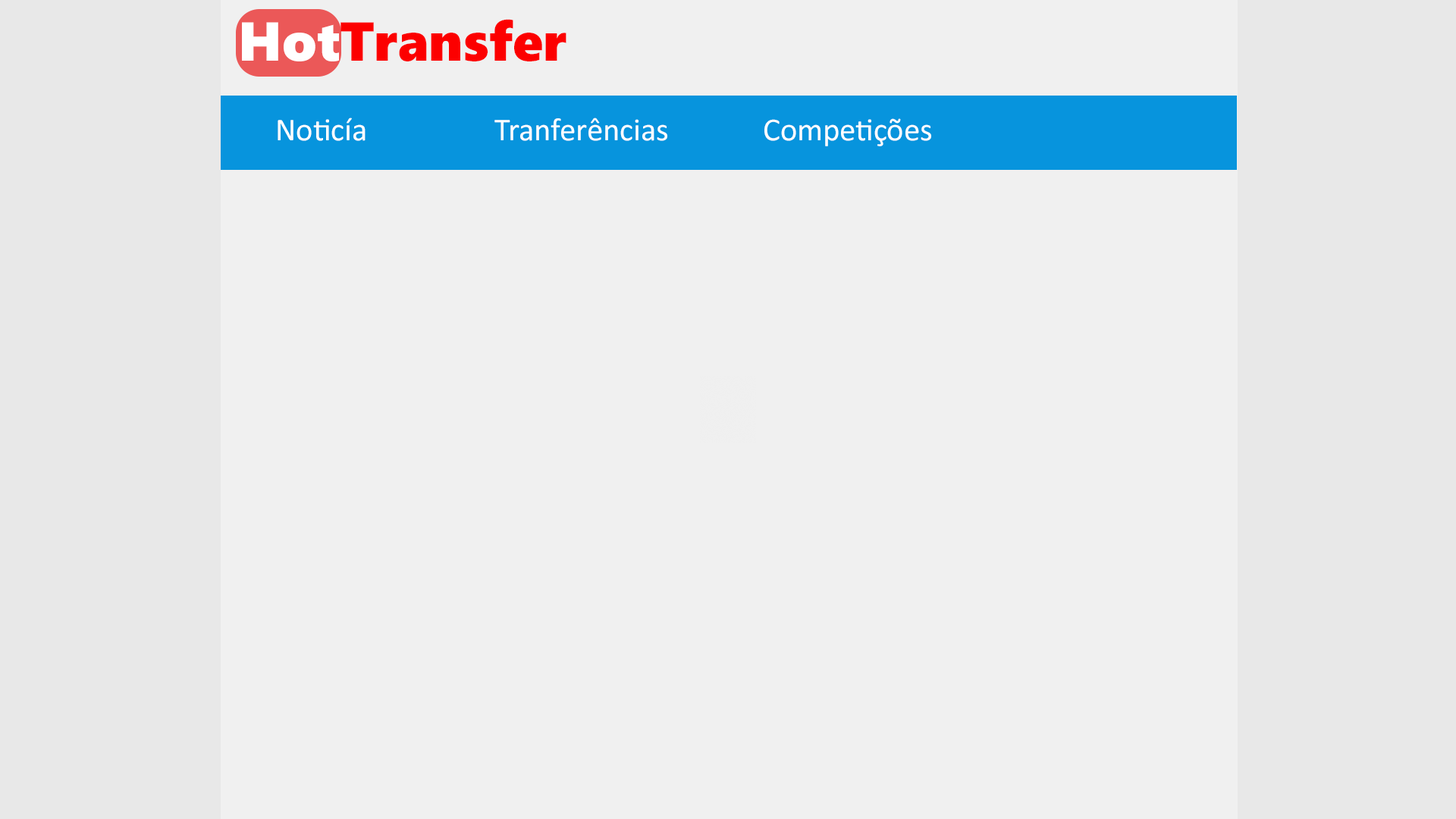
<style>
.page{position:relative;width:1456px;height:819px;background:#f0f0f0}
.page>*{position:absolute;margin:0}
.t1{font:54.6px "SegoeUIBlack";color:#fc0000}
.t2{font:54.6px "SegoeUIBlack";color:#ffffff}
.t3{font:32.2px "Calibri";color:#ffffff}
</style>
<div class="page">
<p class="t1" style="left:242px;top:19px;width:324px;height:42px"><span class="t2">Hot</span>Transfer</p>
<p class="t3" style="left:278px;top:118px;width:88px;height:23px">Noticía</p>
<p class="t3" style="left:494px;top:118px;width:173px;height:23px">Tranferências</p>
<p class="t3" style="left:764px;top:118px;width:167px;height:28px">Competições</p>
</div>
